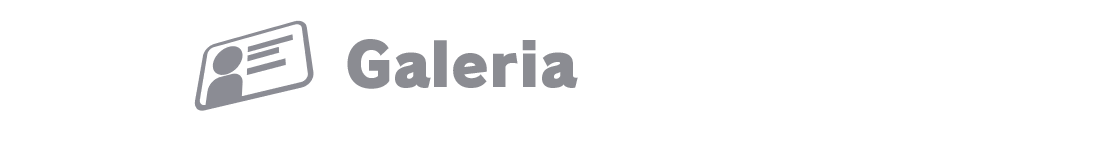
<style>
.page{position:relative;width:1110px;height:144px;background:#ffffff}
.page>*{position:absolute;margin:0}
.t1{font:60px "RodinPro-UB";letter-spacing:0.001em;color:#8b8c92}
</style>
<div class="page">
<p class="t1" style="left:347px;top:39px;width:231px;height:50px">Galeria</p>
</div>
